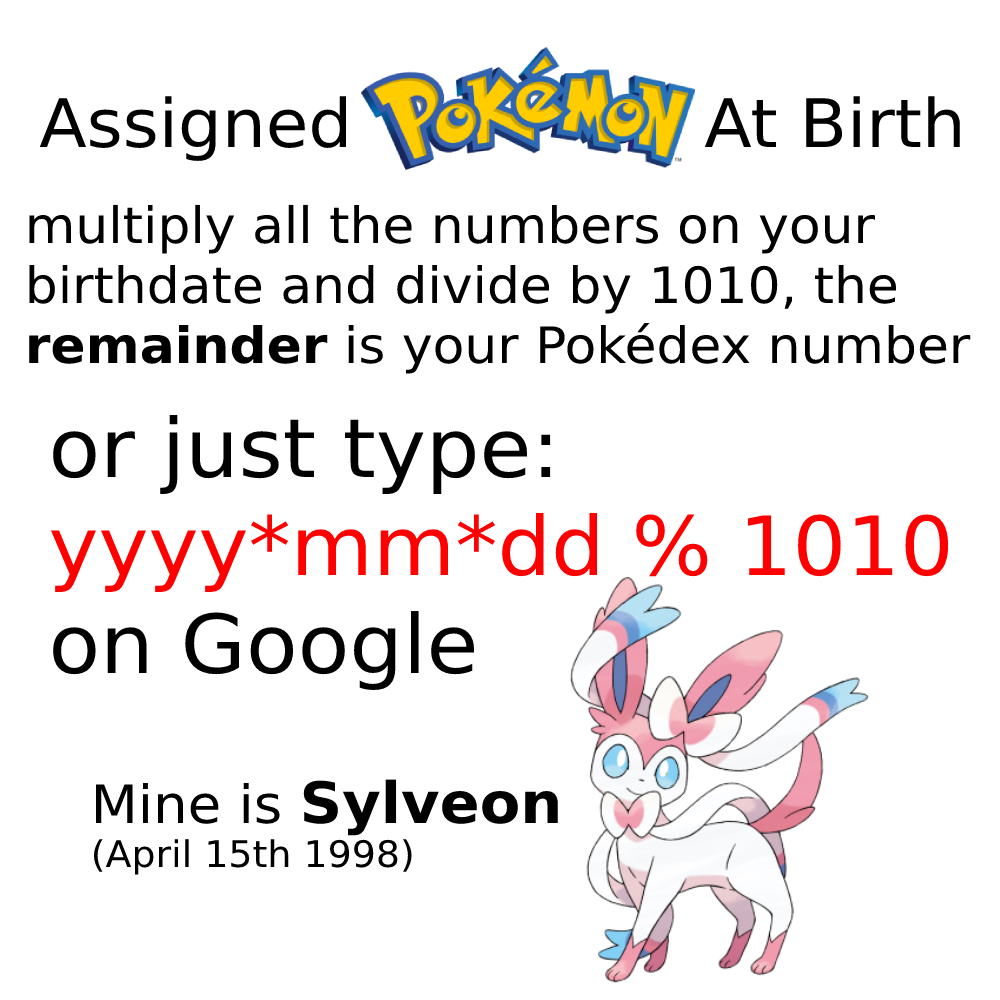
<style>
.page{position:relative;width:1000px;height:1000px;background:#ffffff}
.page>*{position:absolute;margin:0}
.t1{font:66.8px "DejaVuSans";color:#000000;scale:1.04 1}
.t2{font:50.1px "DejaVuSans";color:#000000;scale:1.04 1}
.t3{font:50.1px "DejaVuSans-Bold";color:#000000;scale:1.04 1}
.t4{font:81.5px "DejaVuSans";color:#ff0000;scale:1.04 1}
.t5{font:81.5px "DejaVuSans";color:#000000;scale:1.04 1}
.t6{font:36.6px "DejaVuSans";color:#000000;scale:1.04 1}
.t7{font:52.7px "DejaVuSans";color:#000000;scale:1.04 1}
.t8{font:57.1px "DejaVuSans-Bold";color:#000000;scale:1.04 1}
</style>
<div class="page">
<p class="t1" style="left:39px;top:96px;width:921px;height:65px">Assigned                At Birth</p>
<p class="t2" style="left:29px;top:204px;width:942px;height:170px">multiply all the numbers on your <br>birthdate and divide by 1010, the<br><span class="t3">remainder </span>is your Pokédex number</p>
<p class="t4" style="left:50px;top:415px;width:899px;height:275px"><span class="t5">or just type:<br></span>yyyy*mm*dd % 1010<br><span class="t5">on Google</span></p>
<p class="t6" style="left:94px;top:779px;width:464px;height:96px"><span class="t7">Mine is </span><span class="t8">Sylveon<br></span>(April 15th 1998)</p>
</div>
